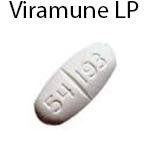
<style>
.page{position:relative;width:148px;height:148px;background:#ffffff}
.page>*{position:absolute;margin:0}
.t1{font:25px "MyriadPro-Regular";color:#000000}
</style>
<div class="page">
<p class="t1" style="left:9px;top:1px;width:130px;height:17px">Viramune LP</p>
</div>
